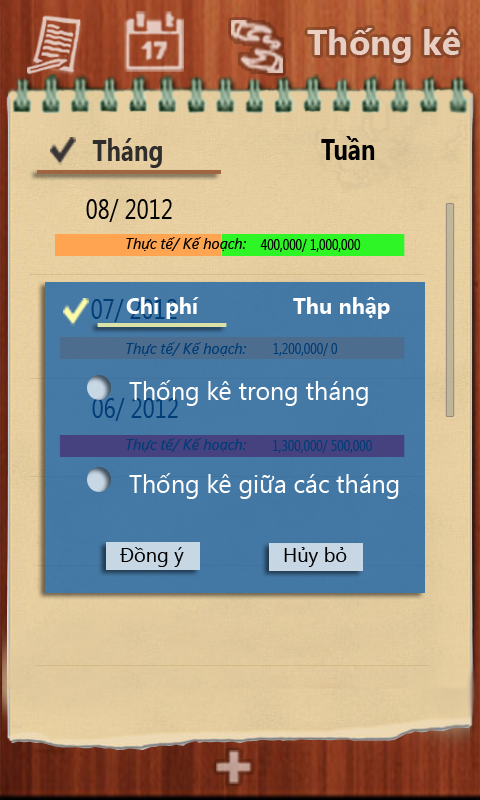
<style>
.page{position:relative;width:480px;height:800px}
.page>*{position:absolute;margin:0}
.t1{font:35px "SegoeUI-Bold";color:#e7cec2}
.t2{font:30px "SegoeUI-Bold";color:#000000;scale:0.8 1}
.t3{font:30px "SegoeUI-Bold";color:#302d2d;scale:0.8 1}
.t4{font:32.5px "SegoeUI-Bold";color:#302d2d;scale:0.8 1}
.t5{font:28px "SegoeUI";color:#000000;scale:0.8 1}
.t6{font:15px "SegoeUI-Italic";color:#000000}
.t7{font:15px "SegoeUI";color:#000000;scale:0.8 1}
.t8{font:28px "SegoeUI";color:#003c76;scale:0.8 1}
.t9{font:22px "SegoeUI-Bold";color:#ffffff}
.t10{font:15px "SegoeUI-Italic";color:#003c76}
.t11{font:15px "SegoeUI";color:#003c76;scale:0.8 1}
.t12{font:25px "SegoeUI";color:#ffffff}
.t13{font:20px "SegoeUI";color:#000000}
</style>
<div class="page">
<p class="t1" style="left:307px;top:28px;width:153px;height:35px">Thống kê</p>
<p class="t2" style="left:321px;top:136px;width:54px;height:24px">Tuần</p>
<p class="t3" style="left:92px;top:138px;width:70px;height:30px"><span class="t4"> </span>Tháng</p>
<p class="t5" style="left:86px;top:199px;width:86px;height:23px">08/ 2012</p>
<p class="t6" style="left:126px;top:237px;width:120px;height:14px">Thực tế/ Kế hoạch:</p>
<p class="t7" style="left:260px;top:239px;width:101px;height:13px">400,000/ 1,000,000</p>
<p class="t8" style="left:91px;top:299px;width:86px;height:23px">07/ 2012</p>
<p class="t9" style="left:126px;top:297px;width:73px;height:22px">Chi phí</p>
<p class="t9" style="left:293px;top:297px;width:97px;height:22px">Thu nhập</p>
<p class="t10" style="left:126px;top:342px;width:120px;height:14px">Thực tế/ Kế hoạch:</p>
<p class="t11" style="left:273px;top:343px;width:65px;height:13px">1,200,000/ 0</p>
<p class="t12" style="left:129px;top:380px;width:239px;height:26px">Thống kê trong tháng</p>
<p class="t8" style="left:92px;top:398px;width:86px;height:23px">06/ 2012</p>
<p class="t10" style="left:126px;top:438px;width:120px;height:14px">Thực tế/ Kế hoạch:</p>
<p class="t11" style="left:273px;top:440px;width:99px;height:13px">1,300,000/ 500,000</p>
<p class="t12" style="left:129px;top:473px;width:270px;height:26px">Thống kê giữa các tháng</p>
<p class="t13" style="left:120px;top:547px;width:64px;height:20px">Đồng ý</p>
<p class="t13" style="left:284px;top:547px;width:63px;height:20px">Hủy bỏ</p>
</div>
